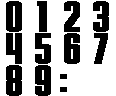
<style>
.page{position:relative;width:116px;height:96px;background:#ffffff}
.page>*{position:absolute;margin:0}
.t1{font:44px "Stark";letter-spacing:0.05em;color:#000000;font-weight:bold}
</style>
<div class="page">
<p class="t1" style="left:6px;top:1px;width:16px;height:31px">0</p>
<p class="t1" style="left:37px;top:1px;width:10px;height:31px">1</p>
<p class="t1" style="left:64px;top:1px;width:16px;height:31px">2</p>
<p class="t1" style="left:93px;top:1px;width:16px;height:31px">3</p>
<p class="t1" style="left:6px;top:33px;width:16px;height:31px">4</p>
<p class="t1" style="left:35px;top:33px;width:16px;height:31px">5</p>
<p class="t1" style="left:64px;top:33px;width:16px;height:31px">6</p>
<p class="t1" style="left:94px;top:33px;width:14px;height:31px">7</p>
<p class="t1" style="left:6px;top:65px;width:16px;height:31px">8</p>
<p class="t1" style="left:35px;top:65px;width:16px;height:31px">9</p>
<p class="t1" style="left:60px;top:74px;width:7px;height:18px">:</p>
</div>
